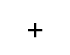
<style>
.page{position:relative;width:70px;height:55px;background:#ffffff}
.page>*{position:absolute;margin:0}
.t1{font:31.8px "DroidSans";color:#000000}
</style>
<div class="page">
<p class="t1" style="left:28px;top:23px;width:15px;height:15px">+</p>
</div>
